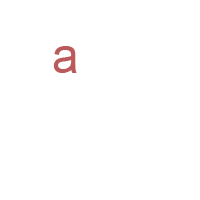
<style>
.page{position:relative;width:200px;height:200px;background:#ffffff}
.page>*{position:absolute;margin:0}
.t1{font:48px "ArialMT";color:#ba5a5a}
</style>
<div class="page">
<p class="t1" style="left:53px;top:46px;width:24px;height:27px">a</p>
</div>
